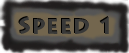
<style>
.page{position:relative;width:129px;height:53px}
.page>*{position:absolute;margin:0}
.t1{font:24px "LithosPro-Bold";color:#393938}
</style>
<div class="page">
<p class="t1" style="left:18px;top:16px;width:90px;height:17px">Speed 1</p>
<p class="t1" style="left:19px;top:17px;width:90px;height:17px">Speed 1</p>
</div>
